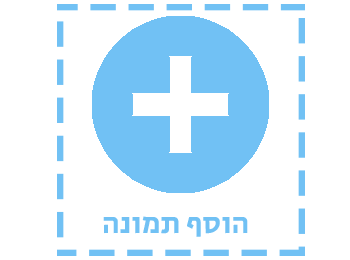
<style>
.page{position:relative;width:350px;height:260px;background:#ffffff}
.page>*{position:absolute;margin:0}
.t1{font:30px "SecularOne-Regular";color:#71c1f4}
</style>
<div class="page">
<p class="t1" style="left:103px;top:216px;width:145px;height:21px">הוסף תמונה</p>
</div>
